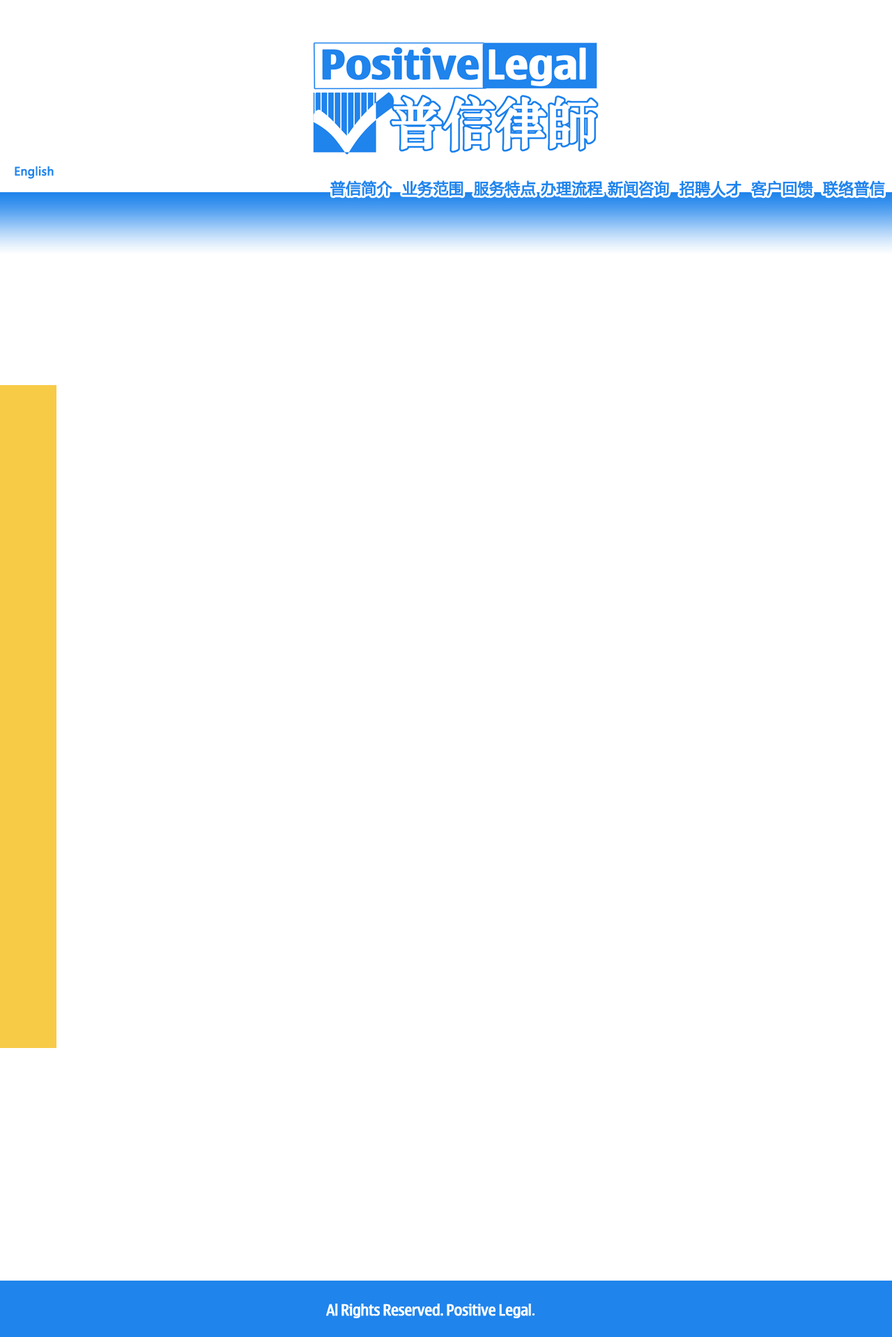
<style>
.page{position:relative;width:892px;height:1337px;background:#ffffff}
.page>*{position:absolute;margin:0}
.t1{font:11.3px "MicrosoftYaHei";letter-spacing:0.005em;color:#2084ed;font-weight:bold}
.t2{font:15px "MicrosoftYaHei";letter-spacing:0.005em;color:#2084ed;font-weight:bold}
.t3{font:15px "NokiaLargeMultiscript";letter-spacing:0.005em;color:#ffffff;font-weight:bold}
.t4{font:15px "SimSun";letter-spacing:0.005em;color:#ffffff;font-weight:bold}
</style>
<div class="page">
<p class="t1" style="left:15px;top:166px;width:39px;height:13px">English</p>
<p class="t2" style="left:330px;top:180px;width:555px;height:16px">普信简介  业务范围  服务特点 办理流程 新闻咨询  招聘人才  客户回馈  联络普信</p>
<p class="t3" style="left:326px;top:1304px;width:209px;height:15px">Al Rights Reserved. Positive Legal<span class="t4">.</span></p>
</div>
